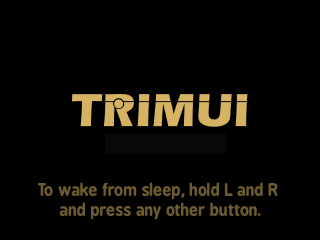
<style>
.page{position:relative;width:320px;height:240px;background:#000000}
.page>*{position:absolute;margin:0}
.t1{font:16px/20px "BPreplay-Bold";color:#6c5a30}
</style>
<div class="page">
<p class="t1" style="left:37px;top:182px;width:241px;height:38px;text-align:center">To wake from sleep, hold L and R <br>and press any other button.</p>
</div>
